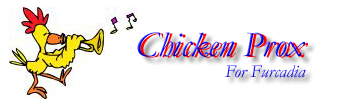
<style>
.page{position:relative;width:360px;height:112px;background:#ffffff}
.page>*{position:absolute;margin:0}
.t1{font:36px "Garamond-Italic"}
.t2{font:36px "Garamond-Italic";color:#ff0000}
.t3{font:18px "Garamond-Italic"}
</style>
<div class="page">
<p class="t1" style="left:137px;top:32px;width:168px;height:25px">Chicken Prox</p>
<p class="t2" style="left:140px;top:33px;width:168px;height:25px">Chicken Prox</p>
<p class="t3" style="left:225px;top:65px;width:81px;height:13px">For Furcadia</p>
</div>
